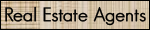
<style>
.page{position:relative;width:150px;height:30px}
.page>*{position:absolute;margin:0}
.t1{font:19px "GeosansLight";color:#000000;font-weight:bold}
</style>
<div class="page">
<p class="t1" style="left:5px;top:6px;width:141px;height:20px">Real Estate Agents</p>
</div>
